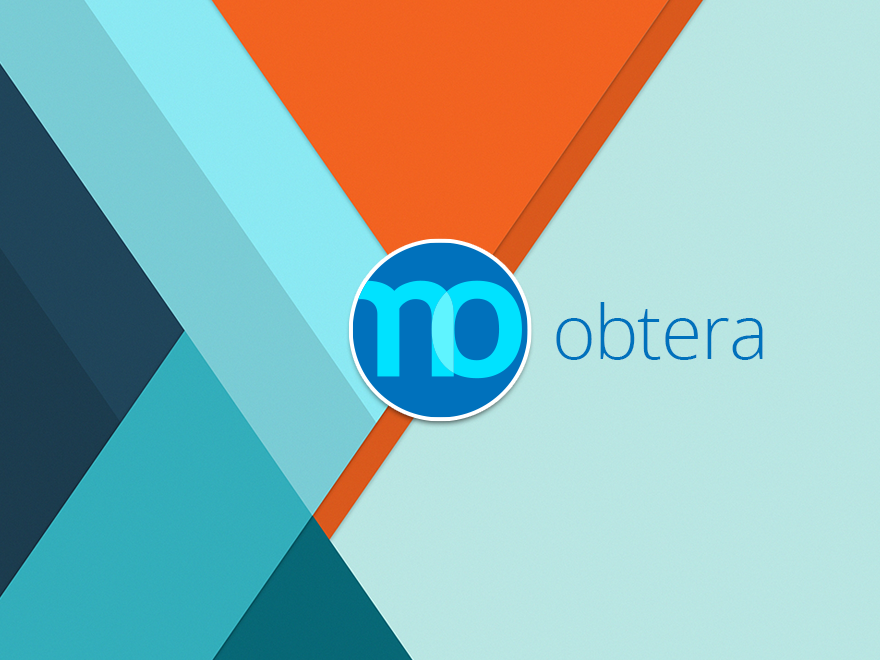
<style>
.page{position:relative;width:880px;height:660px}
.page>*{position:absolute;margin:0}
.t1{font:75px "OpenSans-Light";letter-spacing:-0.025em;color:#0071bc}
</style>
<div class="page">
<p class="t1" style="left:556px;top:302px;width:207px;height:58px">obtera</p>
</div>
